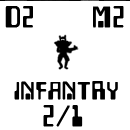
<style>
.page{position:relative;width:130px;height:130px;background:#ffffff}
.page>*{position:absolute;margin:0}
.t1{font:25px "Checkbook";letter-spacing:0.06em;color:#000000;font-weight:bold}
.t2{font:20.8px "Checkbook";letter-spacing:0.06em;color:#000000;font-weight:bold}
</style>
<div class="page">
<p class="t1" style="left:5px;top:5px;width:28px;height:22px">D2</p>
<p class="t1" style="left:93px;top:5px;width:31px;height:22px">M2</p>
<p class="t2" style="left:14px;top:80px;width:104px;height:19px">INFANTRY</p>
<p class="t1" style="left:43px;top:104px;width:40px;height:22px">2/1</p>
</div>
